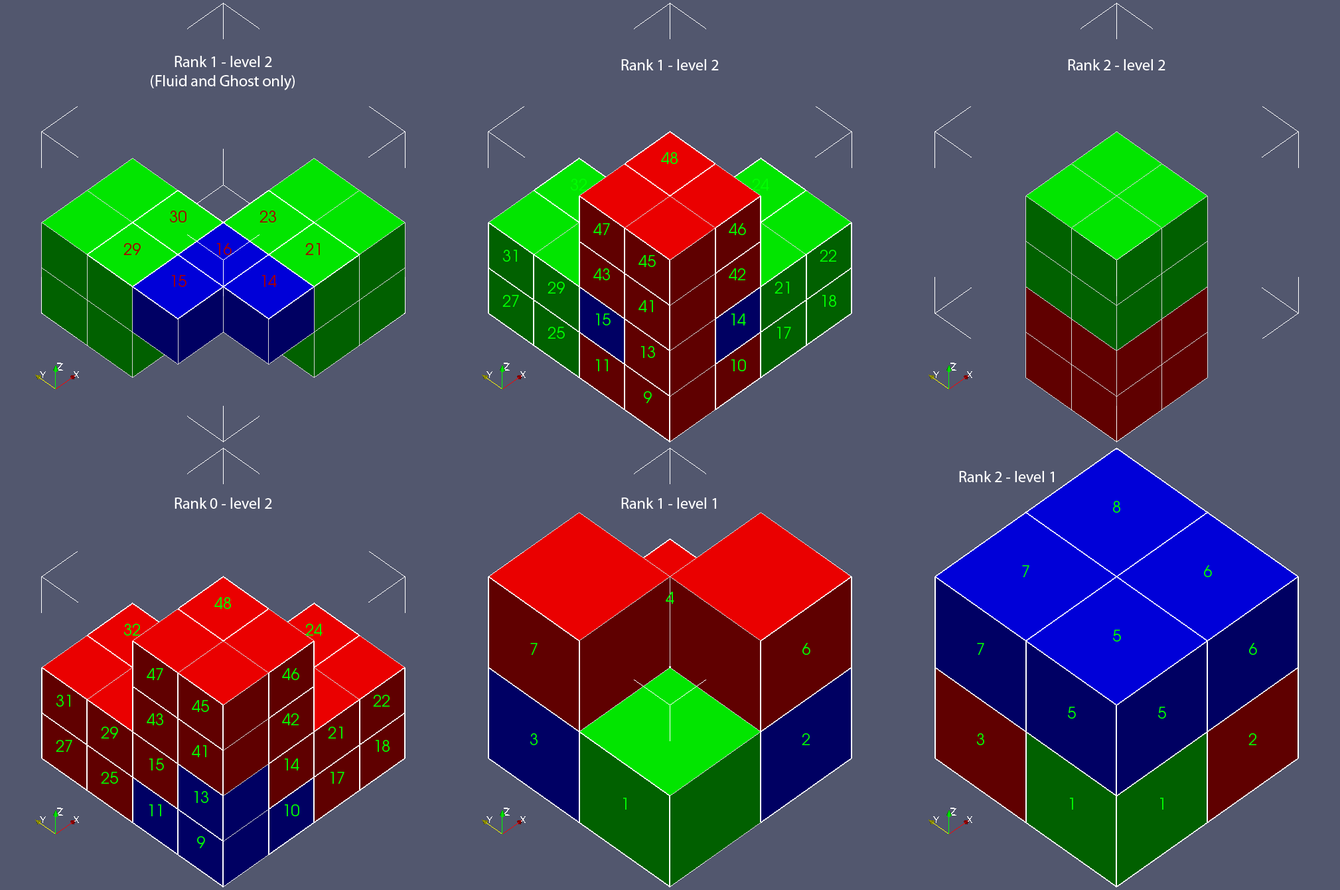
<style>
.page{position:relative;width:1340px;height:890px;background:#52576e}
.page>*{position:absolute;margin:0}
.t1{font:15.9px "MyriadPro-Regular";color:#ffffff}
</style>
<div class="page">
<p class="t1" style="left:151px;top:56px;width:144px;height:34px;text-align:center">Rank 1 - level 2<br>(Fluid and Ghost only)</p>
<p class="t1" style="left:621px;top:59px;width:98px;height:11px">Rank 1 - level 2</p>
<p class="t1" style="left:1068px;top:59px;width:98px;height:11px">Rank 2 - level 2</p>
<p class="t1" style="left:959px;top:471px;width:95px;height:11px">Rank 2 - level 1</p>
<p class="t1" style="left:175px;top:497px;width:97px;height:12px">Rank 0 - level 2</p>
<p class="t1" style="left:621px;top:497px;width:95px;height:12px">Rank 1 - level 1</p>
</div>
